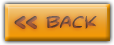
<style>
.page{position:relative;width:114px;height:45px}
.page>*{position:absolute;margin:0}
.t1{font:18.8px "CorpulentCapsBRK"}
.t2{font:25px "ComicBookCommando"}
</style>
<div class="page">
<p class="t1" style="left:14px;top:16px;width:23px;height:13px">&lt;&lt;</p>
<p class="t2" style="left:46px;top:16px;width:51px;height:13px">BACK</p>
</div>
